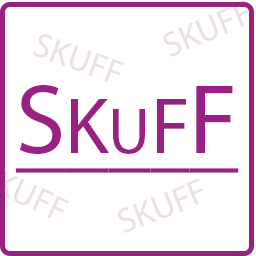
<style>
.page{position:relative;width:256px;height:256px;background:#ffffff}
.page>*{position:absolute;margin:0}
.t1{font:35px "MyriadPro-Regular";color:#eddfea}
.t2{font:100px "MyriadPro-Regular";color:#9a2183;text-decoration:underline}
.t3{font:80px "MyriadPro-Regular";color:#9a2183;text-decoration:underline}
.t4{font:65px "MyriadPro-Regular";color:#9a2183;text-decoration:underline}
</style>
<div class="page">
<p class="t1" style="left:32px;top:34px;width:93px;height:48px;rotate:20deg">SKUFF</p>
<p class="t2" style="left:15px;top:85px;width:224px;height:88px">S<span class="t3">K</span><span class="t4">U</span><span class="t3">F</span>F</p>
<p class="t1" style="left:117px;top:178px;width:86px;height:55px;rotate:-22deg">SKUFF</p>
</div>
